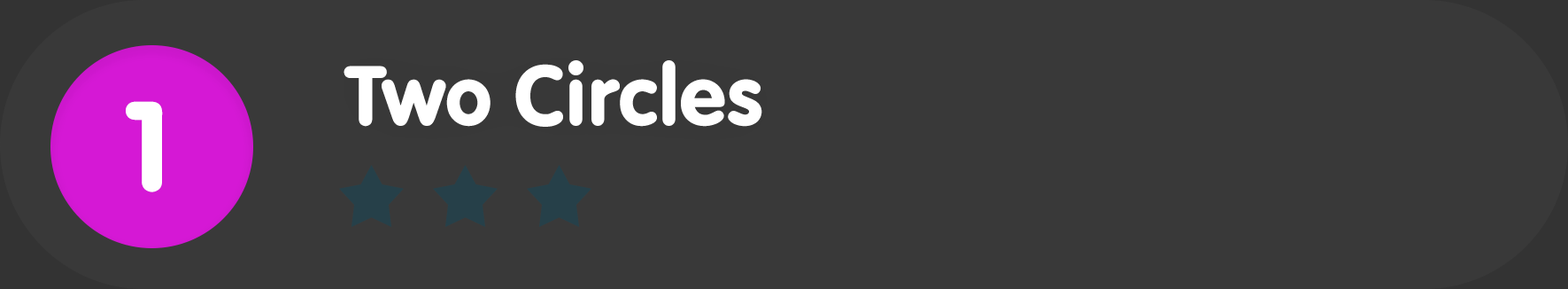
<style>
.page{position:relative;width:1568px;height:289px;background:#393939}
.page>*{position:absolute;margin:0}
.t1{font:88.5px "VAGRundschriftD";color:#ffffff}
.t2{font:132.8px "VAGRundschriftD";color:#ffffff}
</style>
<div class="page">
<p class="t1" style="left:344px;top:60px;width:418px;height:67px">Two Circles</p>
<p class="t2" style="left:126px;top:101px;width:37px;height:91px">1</p>
</div>
